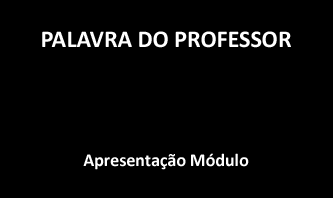
<style>
.page{position:relative;width:333px;height:198px;background:#000000}
.page>*{position:absolute;margin:0}
.t1{font:24px "Calibri-Bold";color:#ffffff}
.t2{font:18px "Calibri-Bold";color:#ffffff}
</style>
<div class="page">
<p class="t1" style="left:42px;top:31px;width:249px;height:17px">PALAVRA DO PROFESSOR</p>
<p class="t2" style="left:83px;top:153px;width:166px;height:17px">Apresentação Módulo</p>
</div>
